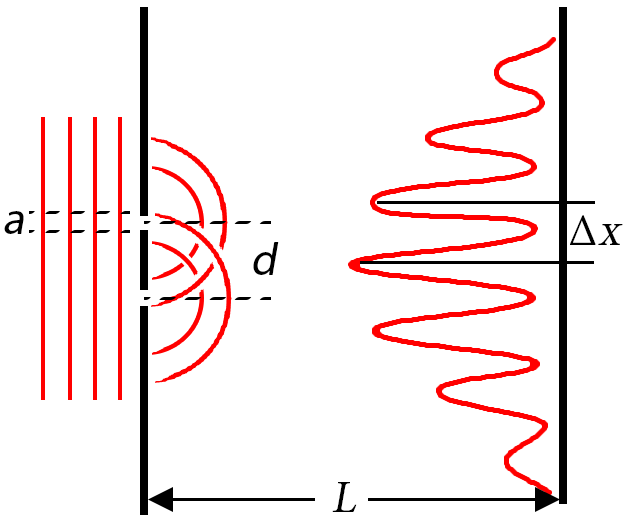
<style>
.page{position:relative;width:627px;height:529px;background:#ffffff}
.page>*{position:absolute;margin:0}
.t1{font:45.8px "MyriadHebrew-Regular";color:#000000;font-style:italic}
.t2{font:45.8px "MinionPro-Regular";color:#000000}
.t3{font:45.8px "MinionPro-Regular";color:#000000;font-style:italic}
</style>
<div class="page">
<p class="t1" style="left:4px;top:211px;width:20px;height:23px">a</p>
<p class="t2" style="left:570px;top:215px;width:53px;height:30px">Δ<span class="t3">x</span></p>
<p class="t1" style="left:253px;top:242px;width:26px;height:33px">d</p>
<p class="t3" style="left:332px;top:482px;width:25px;height:30px">L</p>
</div>
